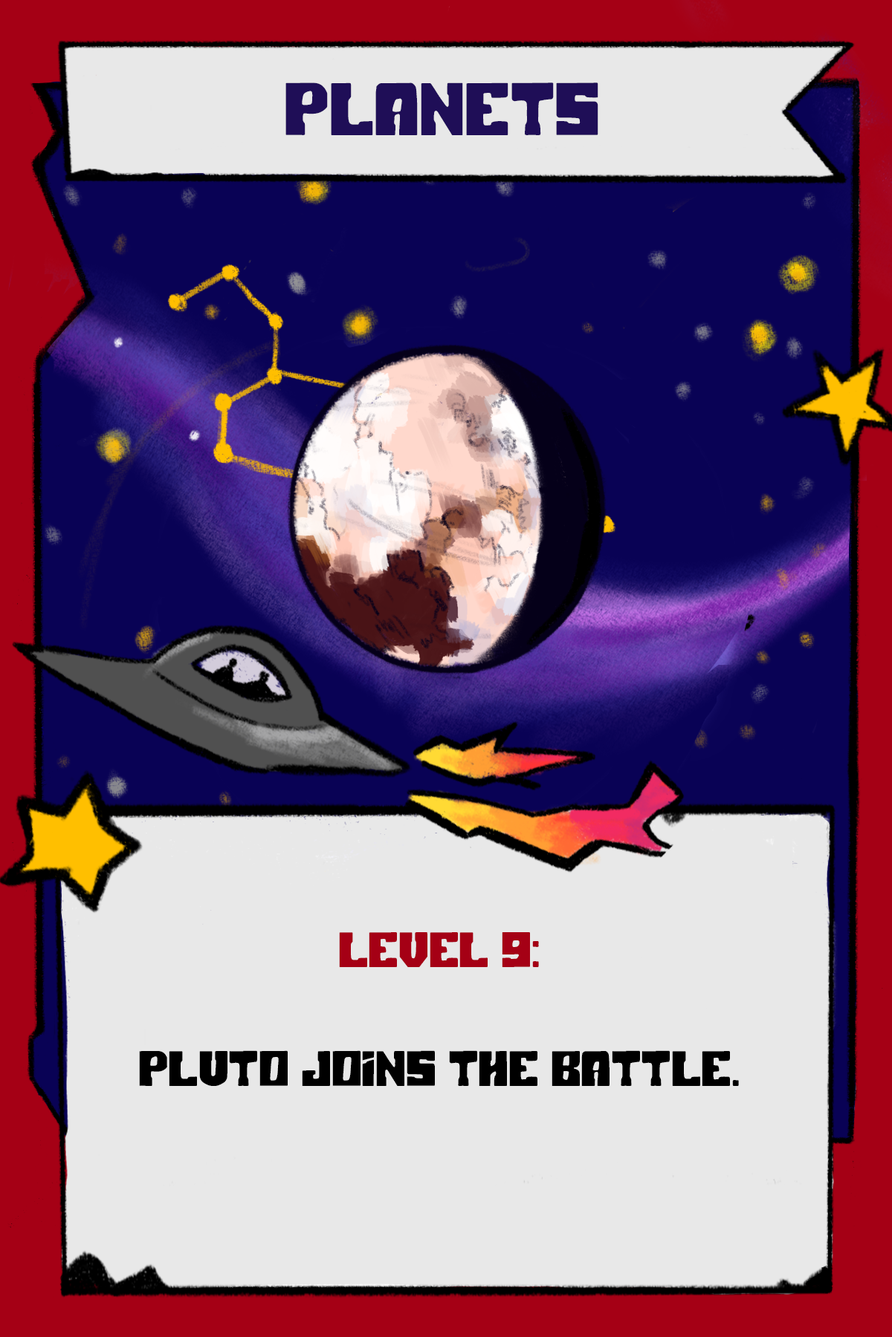
<style>
.page{position:relative;width:892px;height:1337px;background:#e8e8e8}
.page>*{position:absolute;margin:0}
.t1{font:74.3px "PolarPress";color:#1f0e57}
.t2{font:49.5px "PolarPress";color:#000000}
.t3{font:49.5px "PolarPress";color:#a50015}
</style>
<div class="page">
<p class="t1" style="left:285px;top:82px;width:313px;height:53px">PLANETS</p>
<p class="t2" style="left:139px;top:932px;width:600px;height:154px;text-align:center"><span class="t3">LEVEL 9:<br></span><br>Pluto joins the battle.</p>
</div>
